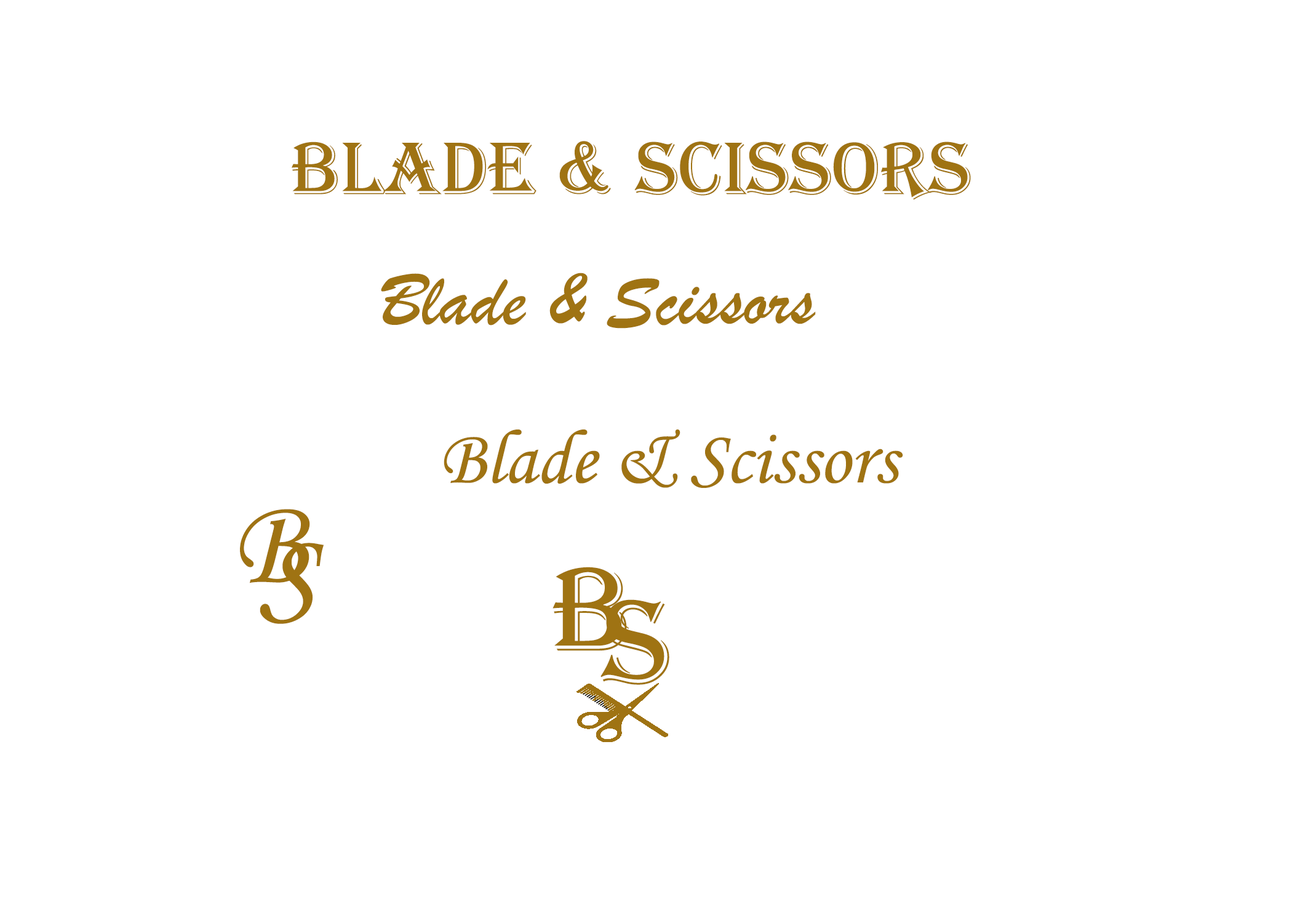
<style>
.page{position:relative;width:1292px;height:923px;background:#ffffff}
.page>*{position:absolute;margin:0}
.t1{font:76.9px "Algerian";color:#9f7313}
.t2{font:76.9px "BrushScriptMT";color:#9f7313}
.t3{font:76.9px "MonotypeCorsiva";color:#9f7313}
.t4{font:123.1px "MonotypeCorsiva";color:#9f7313}
.t5{font:123.1px "Algerian";color:#9f7313}
</style>
<div class="page">
<p class="t1" style="left:292px;top:141px;width:679px;height:59px">Blade &amp; Scissors</p>
<p class="t2" style="left:381px;top:273px;width:435px;height:56px">Blade &amp; Scissors</p>
<p class="t3" style="left:444px;top:429px;width:459px;height:59px">Blade &amp; Scissors</p>
<p class="t4" style="left:240px;top:509px;width:70px;height:74px">B</p>
<p class="t4" style="left:260px;top:543px;width:64px;height:81px">S</p>
<p class="t5" style="left:553px;top:567px;width:74px;height:84px">B</p>
<p class="t5" style="left:600px;top:599px;width:69px;height:86px">S</p>
</div>
